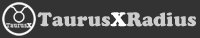
<style>
.page{position:relative;width:200px;height:38px;background:#333333}
.page>*{position:absolute;margin:0}
.t1{font:20.2px "CooperBlack";color:#cccccc}
.t2{font:20.2px "CooperBlack";color:#ffffff}
</style>
<div class="page">
<p class="t1" style="left:37px;top:12px;width:159px;height:15px">Taurus<span class="t2">X</span>Radius</p>
</div>
